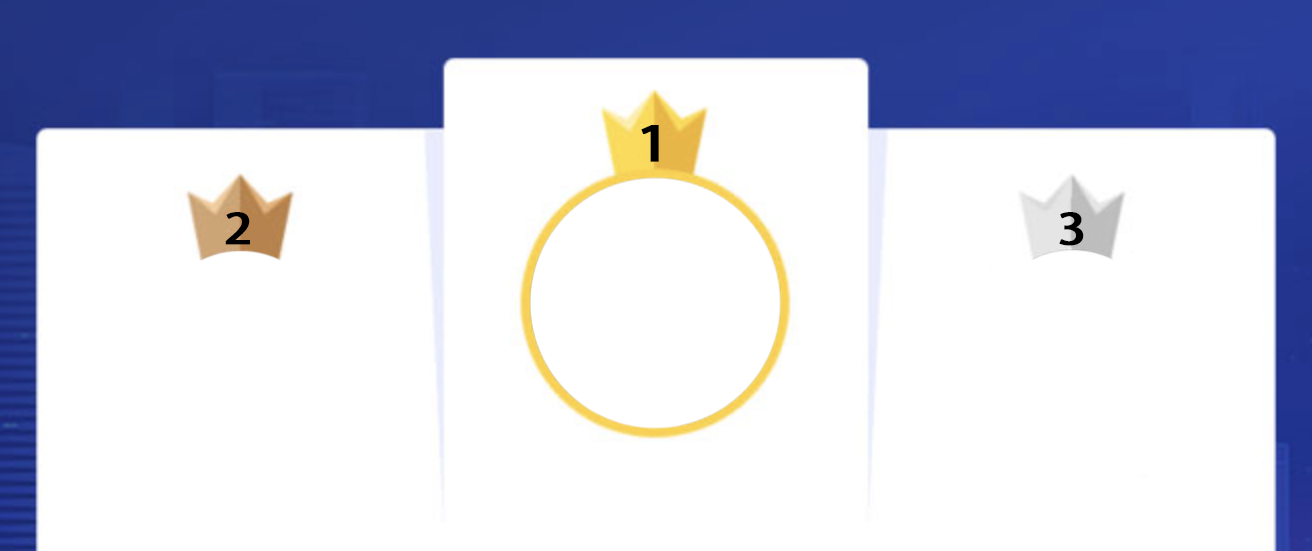
<style>
.page{position:relative;width:1312px;height:551px;background:#ffffff}
.page>*{position:absolute;margin:0}
.t1{font:48px "AdobeHeitiStd-Regular";color:#000000;font-weight:bold;scale:1.2 1}
.t2{font:41.7px "AdobeHeitiStd-Regular";color:#000000;font-weight:bold;scale:1.2 1}
</style>
<div class="page">
<p class="t1" style="left:641px;top:125px;width:18px;height:37px">1</p>
<p class="t2" style="left:225px;top:212px;width:25px;height:33px">2</p>
<p class="t2" style="left:1059px;top:212px;width:25px;height:34px">3</p>
</div>
